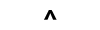
<style>
.page{position:relative;width:100px;height:30px;background:#ffffff}
.page>*{position:absolute;margin:0}
.t1{font:24px "SegoeUIBlack-Italic";color:#000000}
</style>
<div class="page">
<p class="t1" style="left:44px;top:10px;width:13px;height:10px">^</p>
</div>
